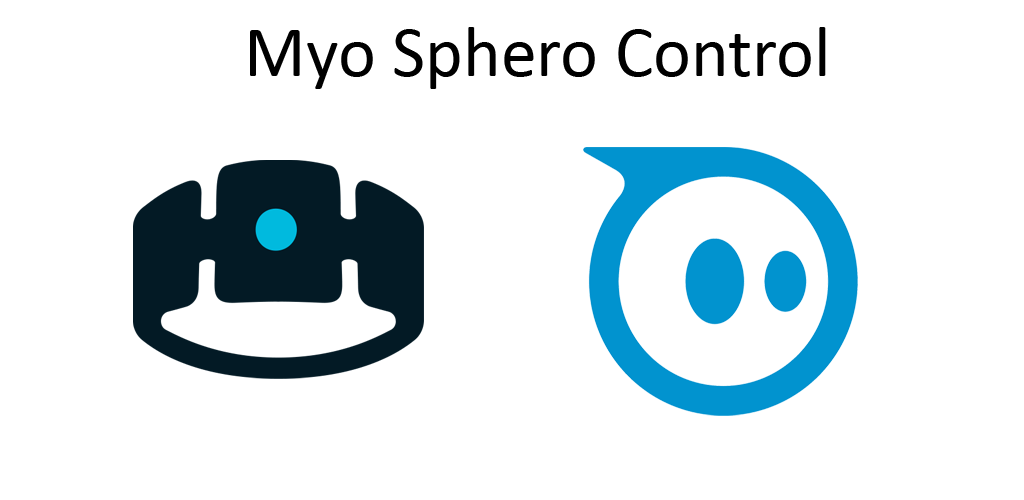
<style>
.page{position:relative;width:1024px;height:500px;background:#ffffff}
.page>*{position:absolute;margin:0}
.t1{font:72px "Calibri";color:#000000}
</style>
<div class="page">
<p class="t1" style="left:250px;top:27px;width:576px;height:62px">Myo Sphero Control</p>
</div>
